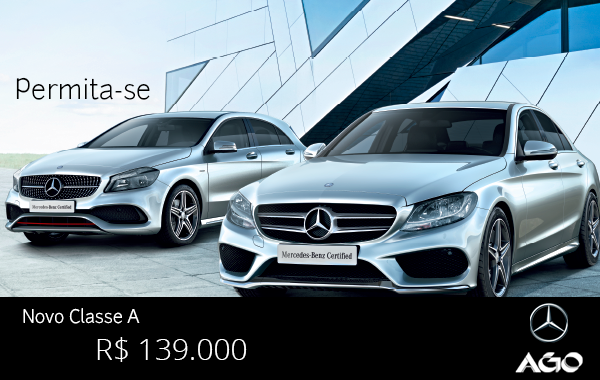
<style>
.page{position:relative;width:600px;height:380px;background:#000000}
.page>*{position:absolute;margin:0}
.t1{font:27px "Junction-Light";color:#000000}
.t2{font:18px "Junction-Light";color:#ffffff}
.t3{font:30px "OpenSans-Light";color:#ffffff}
</style>
<div class="page">
<p class="t1" style="left:16px;top:77px;width:134px;height:23px">Permita-se</p>
<p class="t2" style="left:23px;top:308px;width:117px;height:16px">Novo Classe A</p>
<p class="t3" style="left:97px;top:337px;width:150px;height:25px">R$ 139.000</p>
</div>
